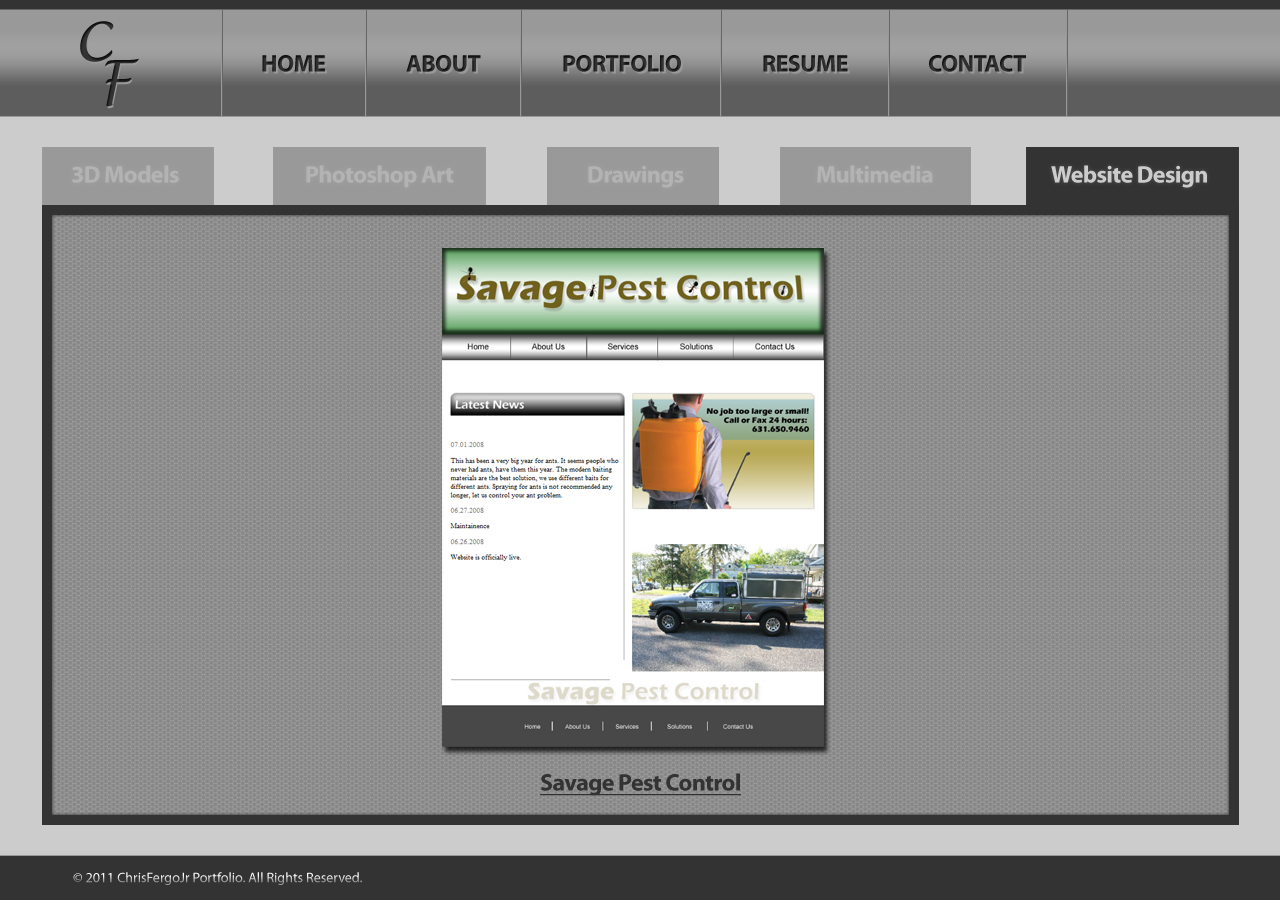
<style>
.page{position:relative;width:1280px;height:900px}
.page>*{position:absolute;margin:0}
.t1{font:24px "MyriadPro-Bold";letter-spacing:-0.025em;color:#282828}
.t2{font:24px "MyriadPro-Bold";letter-spacing:-0.025em;color:#262626}
.t3{font:24px "MyriadPro-Bold";letter-spacing:-0.025em;color:#b3b3b3}
.t4{font:24px "MyriadPro-Bold";letter-spacing:-0.025em;color:#cccccc}
.t5{font:24px "MyriadPro-Bold";letter-spacing:-0.025em;color:#333333;text-decoration:underline}
.t6{font:14px "MyriadPro-Regular"}
</style>
<div class="page">
<p class="t1" style="left:262px;top:55px;width:63px;height:17px">HOME</p>
<p class="t1" style="left:406px;top:55px;width:75px;height:17px">ABOUT</p>
<p class="t2" style="left:563px;top:55px;width:118px;height:17px">PORTFOLIO</p>
<p class="t2" style="left:763px;top:55px;width:85px;height:17px">RESUME</p>
<p class="t2" style="left:929px;top:55px;width:97px;height:17px">CONTACT</p>
<p class="t3" style="left:72px;top:165px;width:107px;height:18px">3D Models</p>
<p class="t3" style="left:306px;top:165px;width:148px;height:23px">Photoshop Art</p>
<p class="t3" style="left:588px;top:165px;width:96px;height:23px">Drawings</p>
<p class="t3" style="left:817px;top:165px;width:116px;height:18px">Multimedia</p>
<p class="t4" style="left:1051px;top:165px;width:156px;height:23px">Website Design</p>
<p class="t5" style="left:540px;top:773px;width:201px;height:23px">Savage Pest Control</p>
<p class="t6" style="left:73px;top:872px;width:289px;height:13px">© 2011 ChrisFergoJr Portfolio. All Rights Reserved.</p>
</div>
